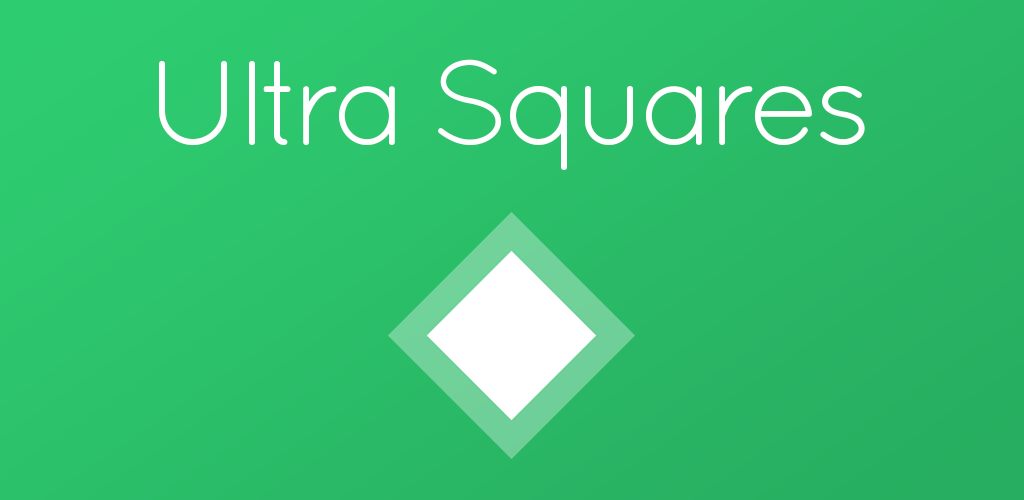
<style>
.page{position:relative;width:1024px;height:500px}
.page>*{position:absolute;margin:0}
.t1{font:120px "Quicksand-Regular";letter-spacing:-0.06em;color:#ffffff}
</style>
<div class="page">
<p class="t1" style="left:159px;top:59px;width:706px;height:111px">Ultra Squares</p>
</div>
